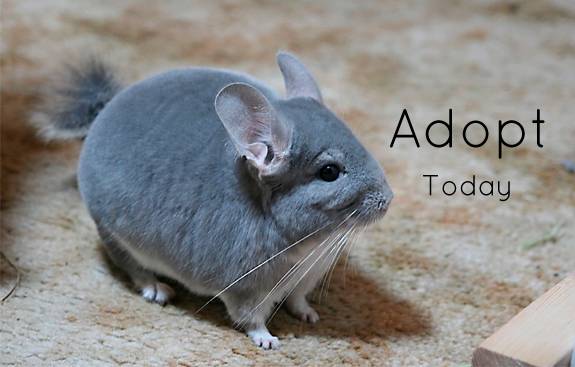
<style>
.page{position:relative;width:575px;height:367px}
.page>*{position:absolute;margin:0}
.t1{font:55.3px "QuicksandBook-Regular";color:#000000}
.t2{font:29.4px "QuicksandBook-Regular";color:#000000}
</style>
<div class="page">
<p class="t1" style="left:390px;top:108px;width:155px;height:51px">Adopt</p>
<p class="t2" style="left:423px;top:175px;width:87px;height:27px">Today</p>
</div>
